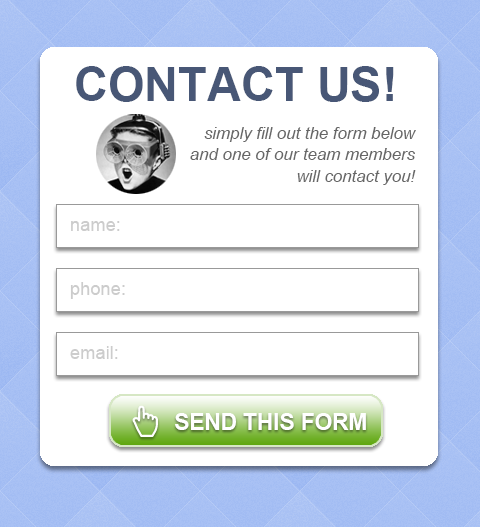
<style>
.page{position:relative;width:480px;height:527px;background:#ffffff}
.page>*{position:absolute;margin:0}
.t1{font:47px "Arial-BoldMT";color:#485776}
.t2{font:16.8px/21.4px "Arial-ItalicMT";color:#666666}
.t3{font:18.3px "ArialMT";color:#cccccc}
.t4{font:22.5px "Arial-BoldMT";color:#ffffff}
</style>
<div class="page">
<p class="t1" style="left:76px;top:66px;width:318px;height:36px">CONTACT US!</p>
<p class="t2" style="left:190px;top:127px;width:226px;height:58px;text-align:right">simply fill out the form below and one of our team members will contact you!</p>
<p class="t3" style="left:71px;top:221px;width:49px;height:10px">name:</p>
<p class="t3" style="left:70px;top:282px;width:55px;height:17px">phone:</p>
<p class="t3" style="left:70px;top:346px;width:48px;height:13px">email:</p>
<p class="t4" style="left:175px;top:413px;width:191px;height:17px">SEND THIS FORM</p>
</div>
